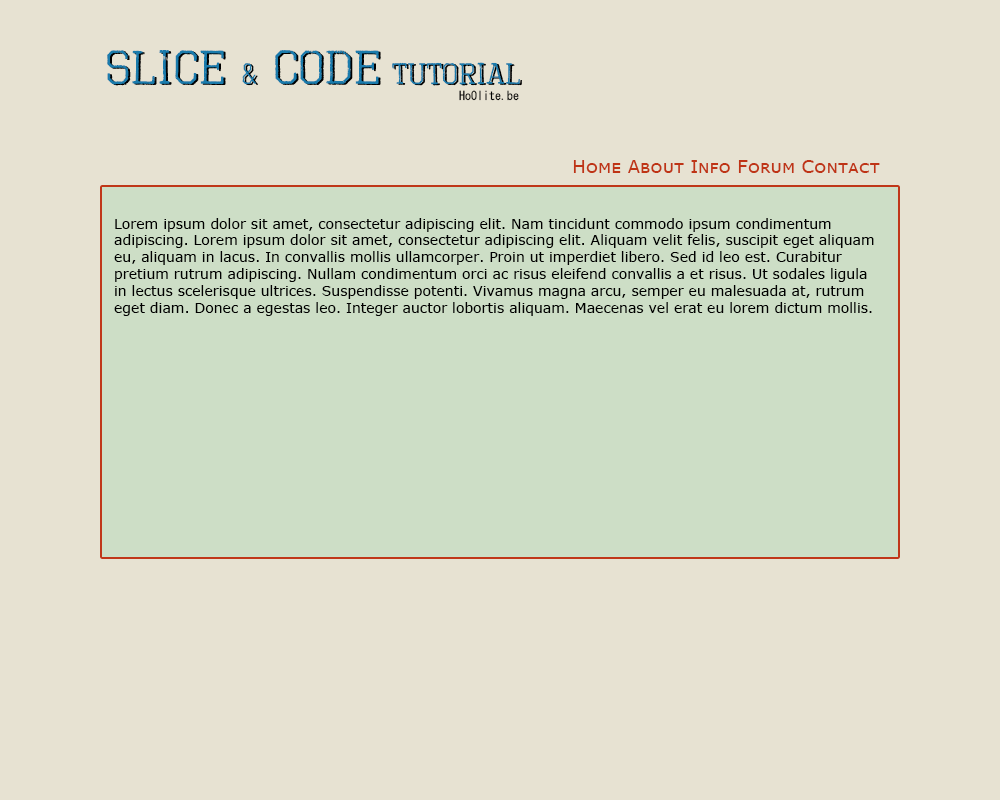
<style>
.page{position:relative;width:1000px;height:800px;background:#e7e2d2}
.page>*{position:absolute;margin:0}
.t1{font:30px "OctinVintageFree";color:#1a7bac}
.t2{font:48px "OctinVintageFree";color:#1a7bac}
.t3{font:12px "MS-Gothic";color:#000000}
.t4{font:18px "Verdana";color:#bf3415;font-variant:small-caps}
.t5{font:14px "Verdana";color:#000000}
</style>
<div class="page">
<p class="t1" style="left:107px;top:50px;width:413px;height:35px"><span class="t2">Slice </span>&amp;<span class="t2"> Code </span>Tutorial</p>
<p class="t3" style="left:459px;top:90px;width:60px;height:11px">HoOlite.be</p>
<p class="t4" style="left:573px;top:160px;width:307px;height:13px">Home About Info Forum Contact</p>
<p class="t5" style="left:114px;top:218px;width:760px;height:98px">Lorem ipsum dolor sit amet, consectetur adipiscing elit. Nam tincidunt commodo ipsum condimentum adipiscing. Lorem ipsum dolor sit amet, consectetur adipiscing elit. Aliquam velit felis, suscipit eget aliquam eu, aliquam in lacus. In convallis mollis ullamcorper. Proin ut imperdiet libero. Sed id leo est. Curabitur pretium rutrum adipiscing. Nullam condimentum orci ac risus eleifend convallis a et risus. Ut sodales ligula in lectus scelerisque ultrices. Suspendisse potenti. Vivamus magna arcu, semper eu malesuada at, rutrum eget diam. Donec a egestas leo. Integer auctor lobortis aliquam. Maecenas vel erat eu lorem dictum mollis.</p>
</div>
